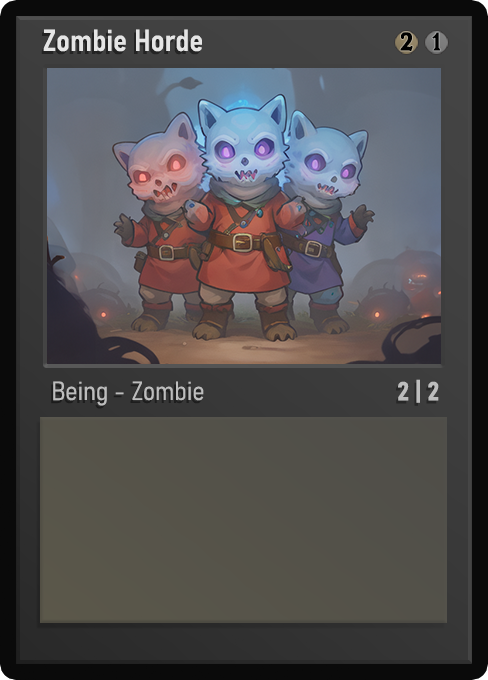
<style>
.page{position:relative;width:488px;height:680px}
.page>*{position:absolute;margin:0}
.t1{font:30px "Bahnschrift-SemiBoldSemiCondensed";color:#f2f2f2;font-weight:bold}
.t2{font:25px "WTRRoycroft";color:#000000;font-weight:bold;scale:1.09 1}
.t3{font:26px "Bahnschrift-LightSemiCondensed";color:#c8c8c8;font-weight:bold}
.t4{font:26px "Bahnschrift-BoldSemiCondensed";color:#bdbdbd;font-weight:bold}
</style>
<div class="page">
<p class="t1" style="left:43px;top:29px;width:159px;height:23px;opacity:0.9">Zombie Horde</p>
<p class="t2" style="left:400px;top:32px;width:13px;height:19px">2</p>
<p class="t2" style="left:432px;top:32px;width:9px;height:19px">1</p>
<p class="t3" style="left:53px;top:381px;width:151px;height:25px;opacity:0.9">Being - Zombie</p>
<p class="t4" style="left:398px;top:379px;width:41px;height:24px">2 | 2</p>
</div>
